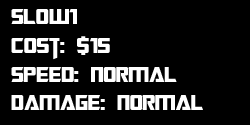
<style>
.page{position:relative;width:250px;height:125px;background:#000000}
.page>*{position:absolute;margin:0}
.t1{font:24px "TransformersMovie";color:#ffffff}
</style>
<div class="page">
<p class="t1" style="left:11px;top:9px;width:192px;height:101px">Slow1<br>Cost: $15<br>Speed: Normal<br>Damage: Normal</p>
</div>
